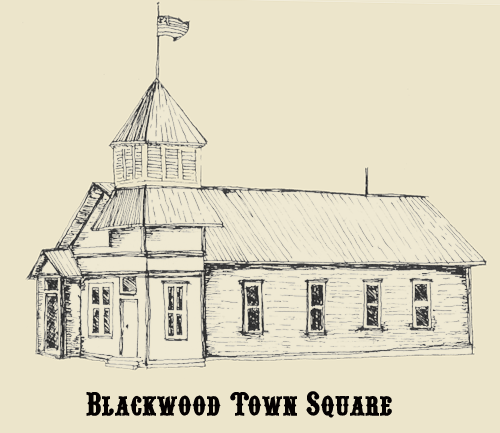
<style>
.page{position:relative;width:500px;height:433px;background:#ece5cb}
.page>*{position:absolute;margin:0}
.t1{font:34px "PointedlyMadSmallCaps";color:#040101}
</style>
<div class="page">
<p class="t1" style="left:86px;top:391px;width:306px;height:27px">Blackwood Town Square</p>
</div>
